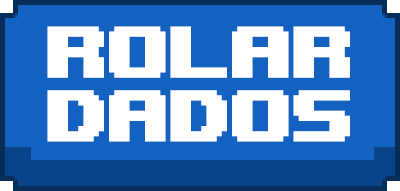
<style>
.page{position:relative;width:400px;height:191px;background:#1362c1}
.page>*{position:absolute;margin:0}
.t1{font:109.4px/63.7px "Upheaval -BRK-";color:#ffffff}
</style>
<div class="page">
<p class="t1" style="left:47px;top:26px;width:303px;height:116px;text-align:center">ROLAR<br>DADOS</p>
</div>
